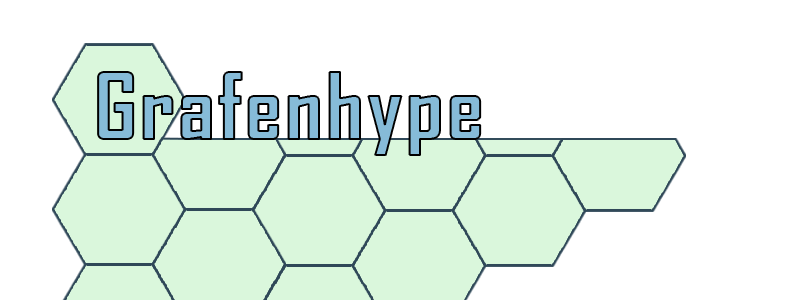
<style>
.page{position:relative;width:800px;height:300px;background:#ffffff}
.page>*{position:absolute;margin:0}
.t1{font:87.9px "AgencyFB-Bold";letter-spacing:0.04em;color:#86bbd8;scale:1.04 1}
</style>
<div class="page">
<p class="t1" style="left:98px;top:72px;width:383px;height:83px">Grafenhype</p>
</div>
